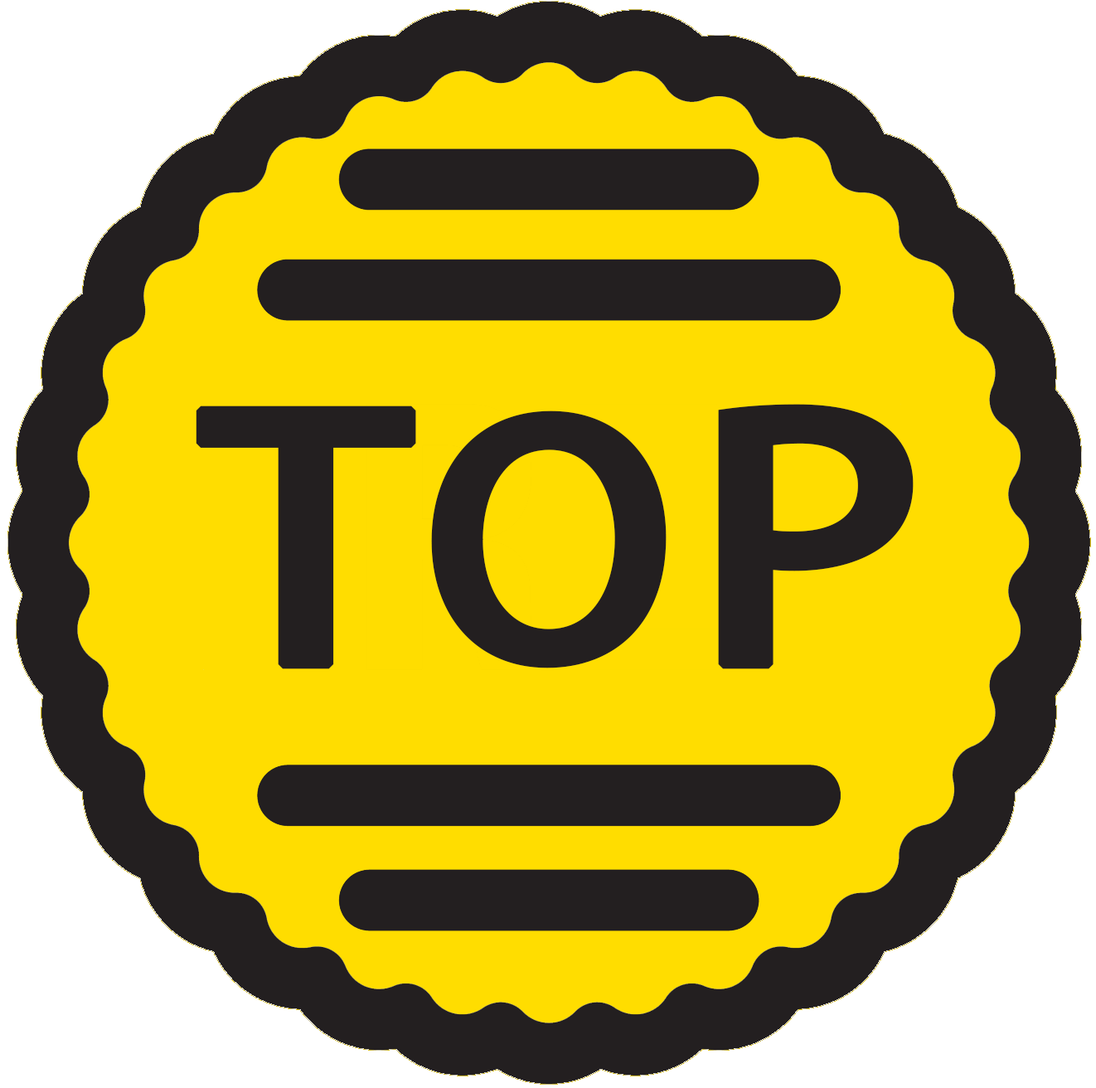
<style>
.page{position:relative;width:1096px;height:1088px;background:#ffdd00}
.page>*{position:absolute;margin:0}
.t1{font:331.7px "AdobeHeitiStd-Regular";color:#231f20;font-weight:bold;scale:1.2 1}
.t2{font:315.1px "AdobeHeitiStd-Regular";color:#231f20;font-weight:bold;scale:1.1 1}
</style>
<div class="page">
<p class="t1" style="left:196px;top:405px;width:220px;height:264px">T</p>
<p class="t2" style="left:431px;top:410px;width:236px;height:258px">O</p>
<p class="t1" style="left:718px;top:404px;width:196px;height:265px">P</p>
</div>
